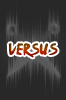
<style>
.page{position:relative;width:66px;height:100px;background:#282828}
.page>*{position:absolute;margin:0}
.t1{font:13px "Ninja-Naruto"}
</style>
<div class="page">
<p class="t1" style="left:8px;top:43px;width:50px;height:15px">versus</p>
</div>
